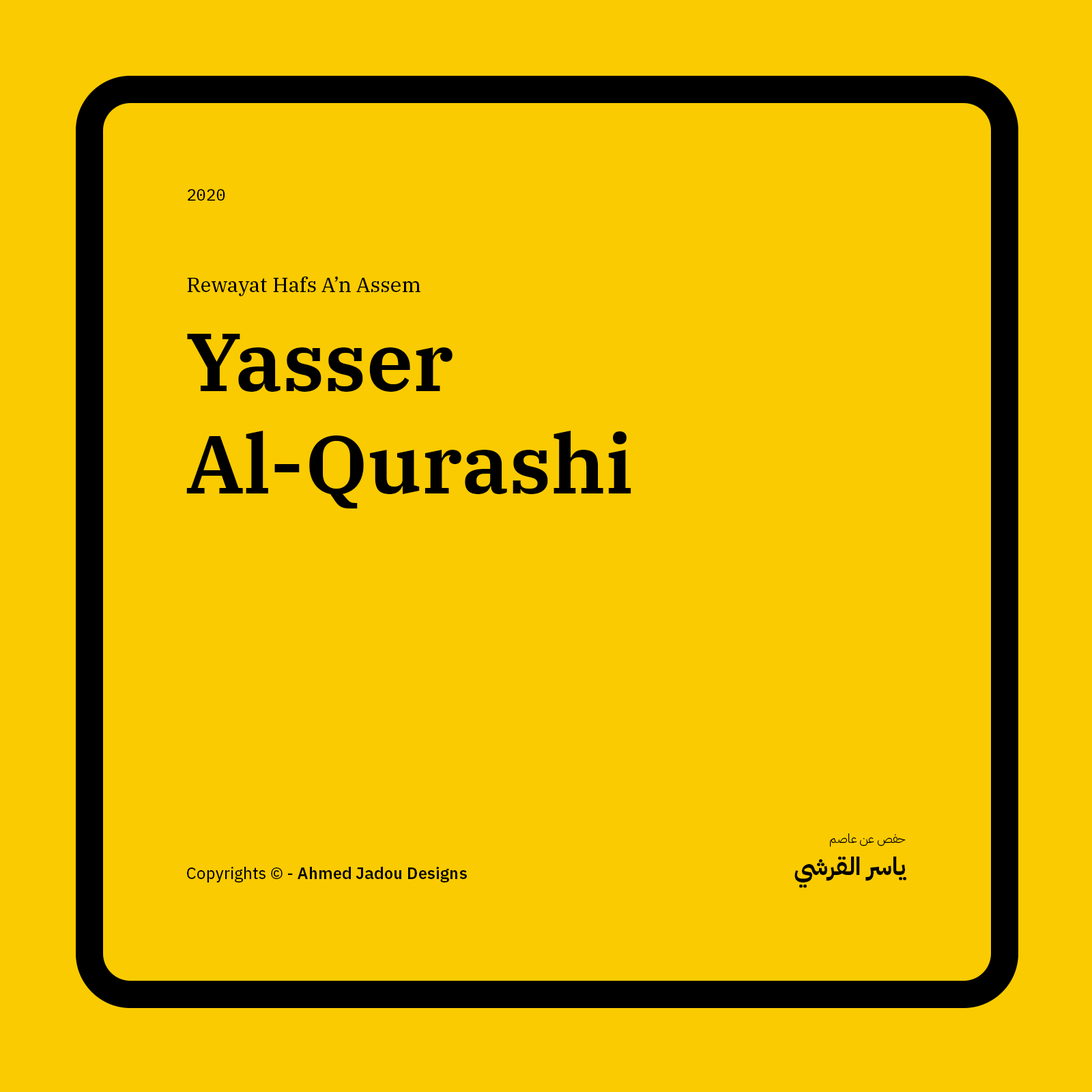
<style>
.page{position:relative;width:1092px;height:1092px;background:#facb00}
.page>*{position:absolute;margin:0}
.t1{font:16.4px "IBMPlexMono-Text";color:#000000}
.t2{font:20.5px "IBMPlexSerif-Text";color:#000000}
.t3{font:81.9px/102.7px "IBMPlexSerif-SemiBold";color:#000000}
.t4{font:12.3px "IBMPlexArabic-Light";color:#000000}
.t5{font:24.6px "IBMPlexArabic-Bold";color:#000000}
.t6{font:16.4px "IBMPlexSans-SemiBold";color:#000000}
.t7{font:16.4px "IBMPlexSans-Text";color:#000000}
</style>
<div class="page">
<p class="t1" style="left:188px;top:189px;width:37px;height:12px">2020</p>
<p class="t2" style="left:187px;top:276px;width:233px;height:20px">Rewayat Hafs A’n Assem</p>
<p class="t3" style="left:186px;top:334px;width:445px;height:174px">Yasser Al-Qurashi</p>
<p class="t4" style="left:830px;top:833px;width:76px;height:14px">حفص عن عاصم</p>
<p class="t5" style="left:794px;top:857px;width:112px;height:31px">ياسر القرشي</p>
<p class="t6" style="left:187px;top:867px;width:280px;height:15px"><span class="t7">Copyrights © - </span>Ahmed Jadou Designs</p>
</div>
